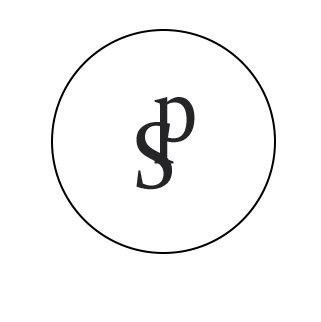
<style>
.page{position:relative;width:321px;height:322px;background:#ffffff}
.page>*{position:absolute;margin:0}
.t1{font:95px "Constantia";letter-spacing:0.02em;color:#252527;scale:0.83 1}
</style>
<div class="page">
<p class="t1" style="left:154px;top:97px;width:41px;height:67px">p</p>
<p class="t1" style="left:136px;top:122px;width:36px;height:68px">S</p>
</div>
